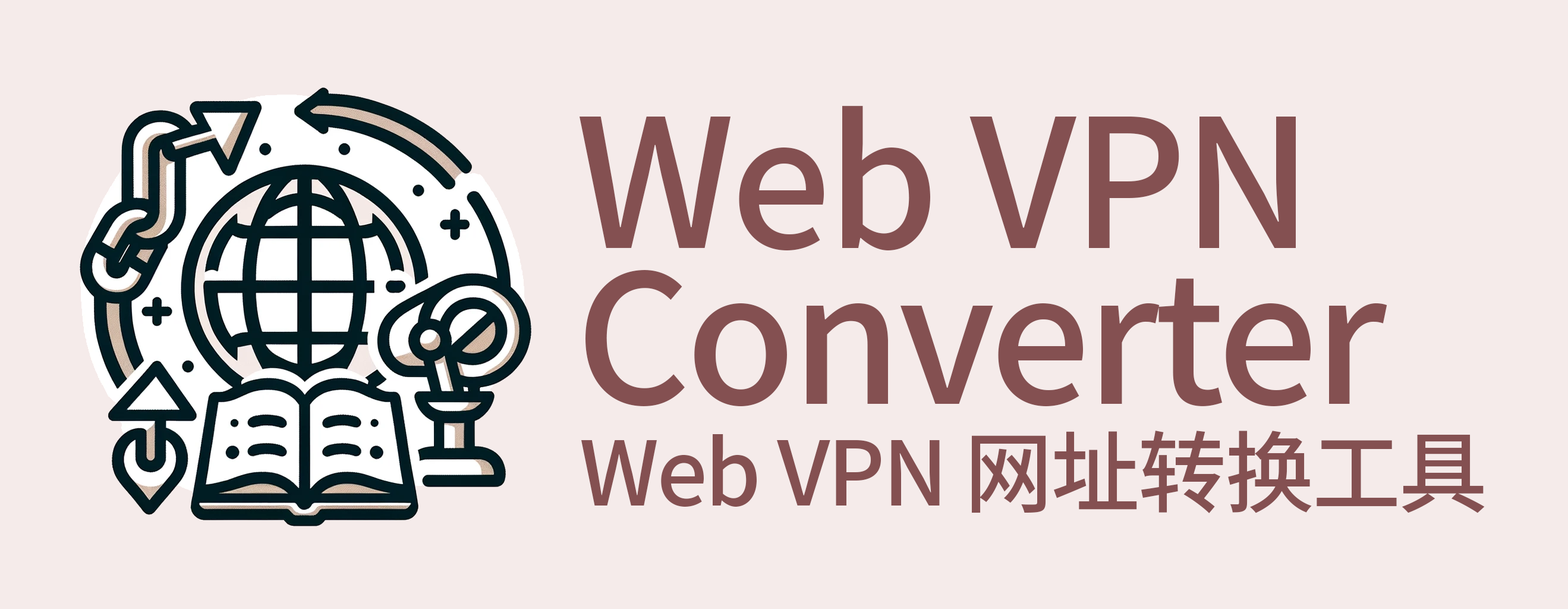
<style>
.page{position:relative;width:1568px;height:609px;background:#f5ebea}
.page>*{position:absolute;margin:0}
.t1{font:178.3px/155.7px "SourceHanSansSC-Medium";letter-spacing:-0.025em;color:#845051}
.t2{font:89.2px "SourceHanSansSC-Medium";letter-spacing:-0.025em;color:#845051}
</style>
<div class="page">
<p class="t1" style="left:580px;top:106px;width:807px;height:301px">Web VPN<br>Converter</p>
<p class="t2" style="left:581px;top:430px;width:904px;height:83px">Web VPN 网址转换工具</p>
</div>
